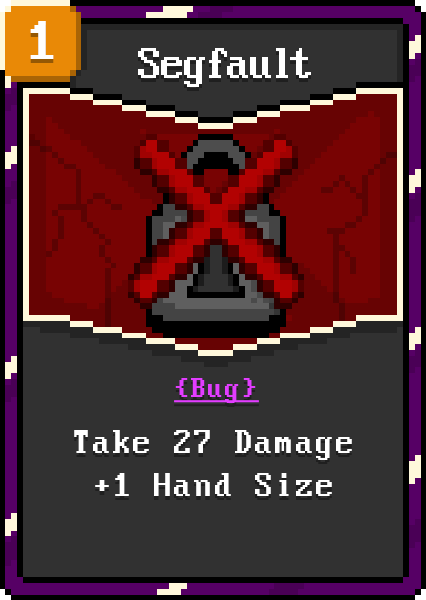
<style>
.page{position:relative;width:426px;height:600px;background:#313131}
.page>*{position:absolute;margin:0}
.t1{font:60px "PerfectDOSVGA437";color:#ffffff}
.t2{font:48px "PerfectDOSVGA437";letter-spacing:-0.075em;color:#ffffff}
.t3{font:30px "PerfectDOSVGA437";color:#e23dff;text-decoration:underline}
.t4{font:36px "PerfectDOSVGA437";color:#ffffff}
</style>
<div class="page">
<p class="t1" style="left:30px;top:21px;width:24px;height:38px">1</p>
<p class="t2" style="left:138px;top:48px;width:173px;height:39px">Segfault</p>
<p class="t3" style="left:174px;top:378px;width:85px;height:25px">{Bug}</p>
<p class="t4" style="left:74px;top:430px;width:278px;height:66px;text-align:center">Take 27 Damage<br>+1 Hand Size</p>
</div>
